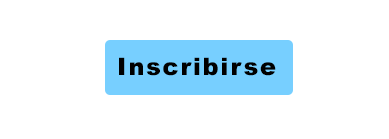
<style>
.page{position:relative;width:389px;height:139px;background:#ffffff}
.page>*{position:absolute;margin:0}
.t1{font:24px "Arial-Black";letter-spacing:0.075em;color:#000000}
</style>
<div class="page">
<p class="t1" style="left:119px;top:57px;width:157px;height:19px">Inscribirse</p>
</div>
